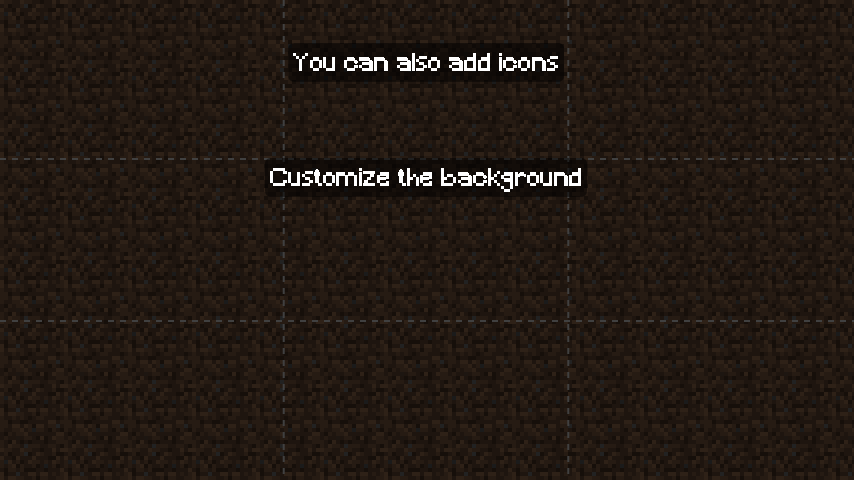
<style>
.page{position:relative;width:854px;height:480px;background:#1e150f}
.page>*{position:absolute;margin:0}
.t1{font:24px "Minecraft";color:#000000}
.t2{font:24px "Minecraft";color:#ffffff}
</style>
<div class="page">
<p class="t1" style="left:270px;top:47px;width:313px;height:145px;text-align:center;opacity:0.5">You can also add icons<br><br><br><br>Customize the background</p>
<p class="t2" style="left:270px;top:53px;width:311px;height:139px;text-align:center">You can also add icons<br><br><br><br>Customize the background</p>
</div>
